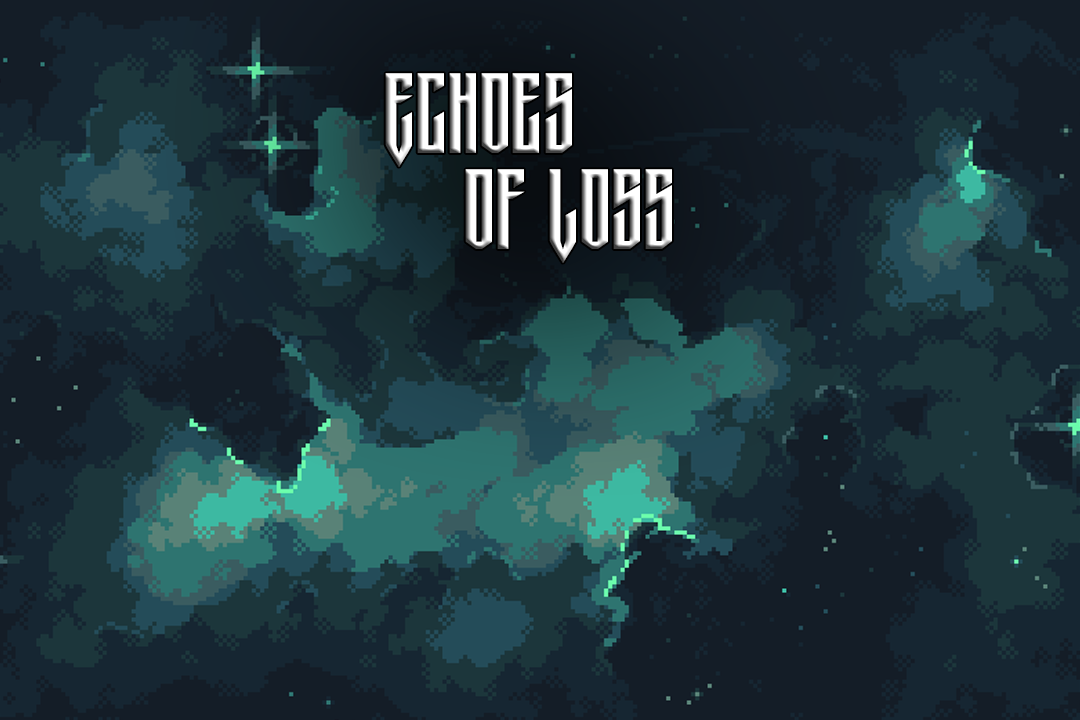
<style>
.page{position:relative;width:1080px;height:720px}
.page>*{position:absolute;margin:0}
.t1{font:80px "GamerockPersonalUse"}
</style>
<div class="page">
<p class="t1" style="left:385px;top:73px;width:287px;height:190px">Echoes <br>    of Loss</p>
</div>
